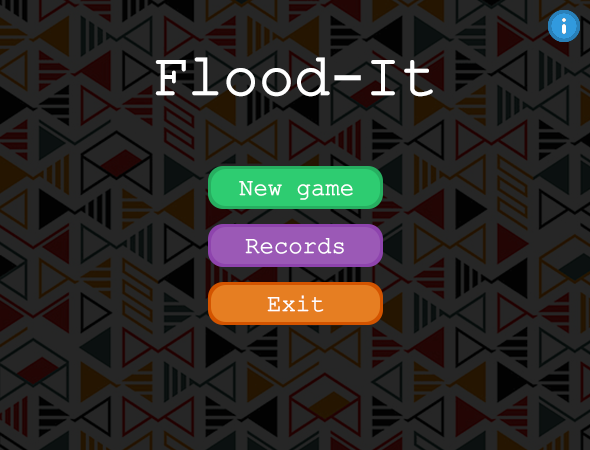
<style>
.page{position:relative;width:590px;height:450px;background:#262626}
.page>*{position:absolute;margin:0}
.t1{font:59px "ERKurierKOI8Normal";color:#ffffff}
.t2{font:24px "ERKurierKOI8Normal";color:#ffffff}
</style>
<div class="page">
<p class="t1" style="left:155px;top:57px;width:278px;height:40px">Flood-It</p>
<p class="t2" style="left:239px;top:181px;width:114px;height:19px">New game</p>
<p class="t2" style="left:245px;top:238px;width:99px;height:16px">Records</p>
<p class="t2" style="left:267px;top:295px;width:57px;height:17px">Exit</p>
</div>
